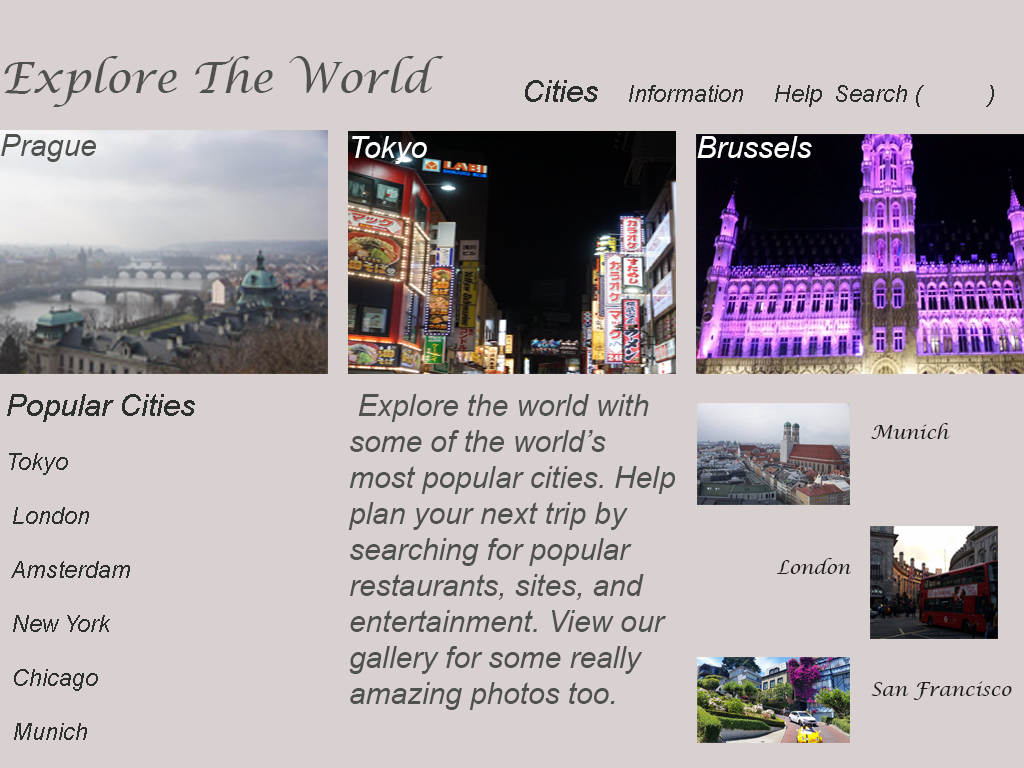
<style>
.page{position:relative;width:1024px;height:768px;background:#d9d0d0}
.page>*{position:absolute;margin:0}
.t1{font:42.8px "LucidaCalligraphy-Italic";color:#4e514e}
.t2{font:22.5px "Arial-ItalicMT";color:#2d2e2e}
.t3{font:30px "Arial-ItalicMT";color:#2d2e2e}
.t4{font:30px "Arial-ItalicMT";color:#4e514e}
.t5{font:30px "Arial-ItalicMT";color:#ffffff}
.t6{font:18.7px "LucidaCalligraphy-Italic";color:#1d1e1d}
.t7{font:30px "Arial-ItalicMT";color:#1d1e1d}
.t8{font:18.8px "LucidaCalligraphy-Italic";color:#1d1e1d}
.t9{font:30px "LucidaCalligraphy-Italic";color:#1d1e1d}
</style>
<div class="page">
<p class="t1" style="left:4px;top:56px;width:440px;height:51px">Explore The World</p>
<p class="t2" style="left:525px;top:80px;width:469px;height:27px"><span class="t3">Cities</span>     Information     Help  Search (           )</p>
<p class="t4" style="left:1px;top:134px;width:95px;height:28px">Prague</p>
<p class="t5" style="left:352px;top:136px;width:75px;height:28px">Tokyo</p>
<p class="t5" style="left:697px;top:136px;width:115px;height:22px">Brussels</p>
<p class="t2" style="left:7px;top:394px;width:188px;height:346px"><span class="t3">Popular Cities <br></span><br> Tokyo<br><br>  London<br><br>  Amsterdam<br><br>  New York<br><br>  Chicago<br><br>  Munich</p>
<p class="t4" style="left:348px;top:394px;width:327px;height:316px">Explore the world with some of the world’s most popular cities. Help plan your next trip by searching for popular <br>restaurants, sites, and entertainment. View our gallery for some really<br>amazing photos too.</p>
<p class="t6" style="left:871px;top:423px;width:79px;height:16px"><span class="t7"><br></span>Munich</p>
<p class="t8" style="left:776px;top:558px;width:75px;height:16px"><span class="t9"><br></span>London</p>
<p class="t8" style="left:871px;top:681px;width:141px;height:19px">San Francisco</p>
</div>
